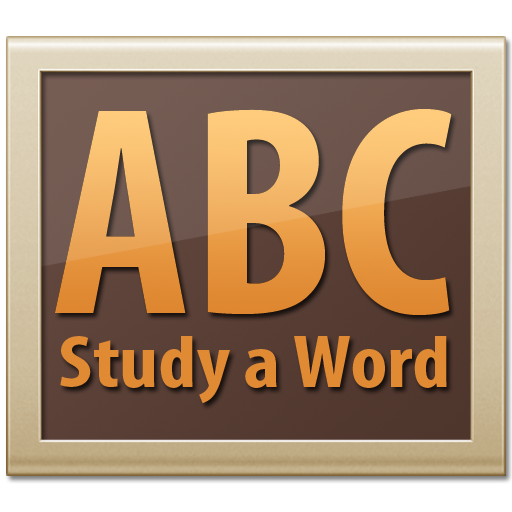
<style>
.page{position:relative;width:512px;height:512px}
.page>*{position:absolute;margin:0}
.t1{font:300px "MyriadPro-BoldCond"}
.t2{font:75.5px "MyriadPro-BoldCond";color:#e08a34;scale:1.14 1}
</style>
<div class="page">
<p class="t1" style="left:55px;top:109px;width:397px;height:206px">ABC</p>
<p class="t2" style="left:60px;top:336px;width:387px;height:68px">Study a Word</p>
</div>
